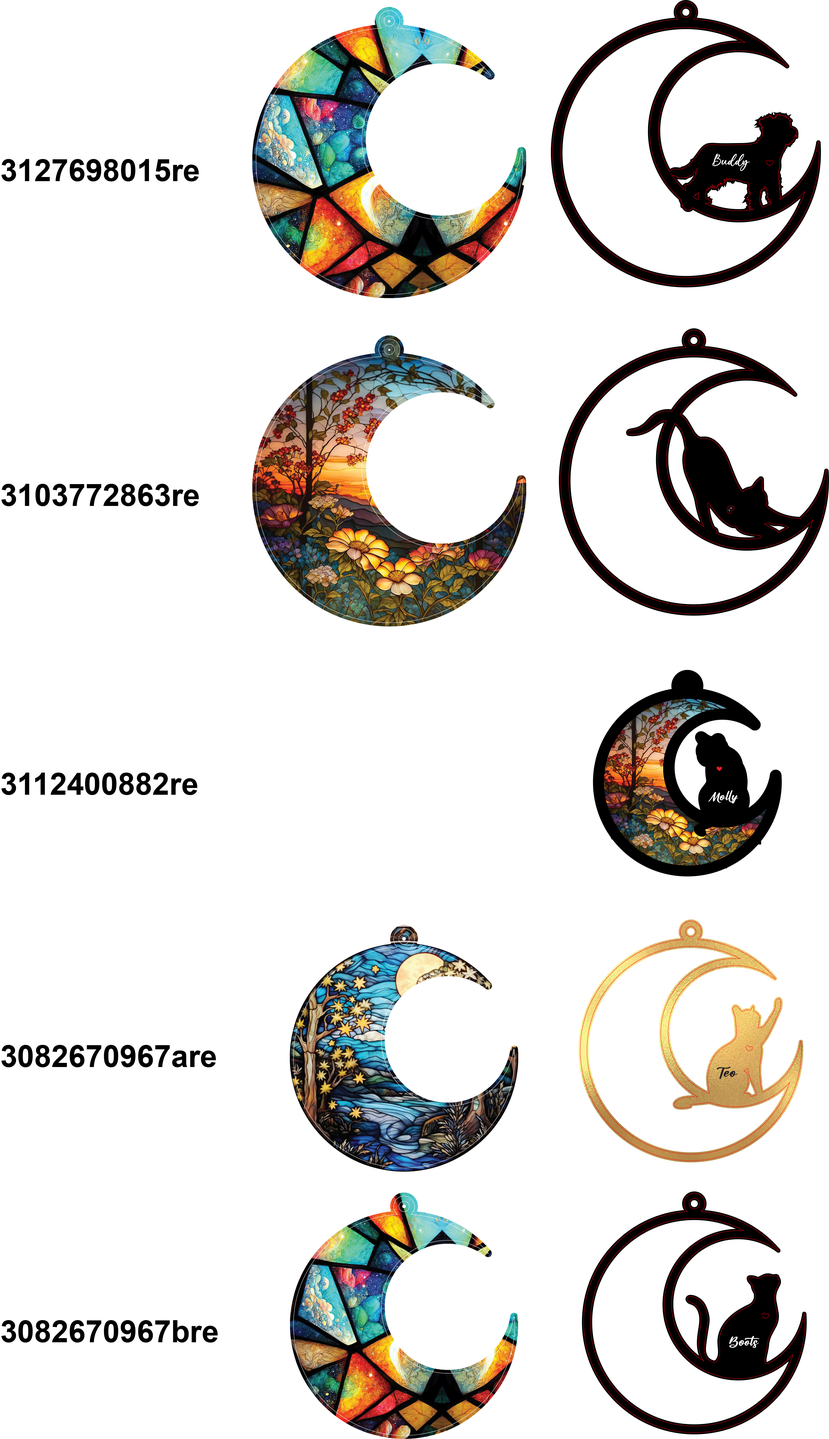
<style>
.page{position:relative;width:829px;height:1439px;background:#ffffff}
.page>*{position:absolute;margin:0}
.t1{font:30.7px "Arial-BoldMT";color:#000000}
</style>
<div class="page">
<p class="t1" style="left:1px;top:159px;width:198px;height:22px">3127698015re</p>
<p class="t1" style="left:1px;top:484px;width:198px;height:22px">3103772863re</p>
<p class="t1" style="left:1px;top:772px;width:196px;height:23px">3112400882re</p>
<p class="t1" style="left:1px;top:1045px;width:215px;height:22px">3082670967are</p>
<p class="t1" style="left:1px;top:1320px;width:217px;height:22px">3082670967bre</p>
</div>
